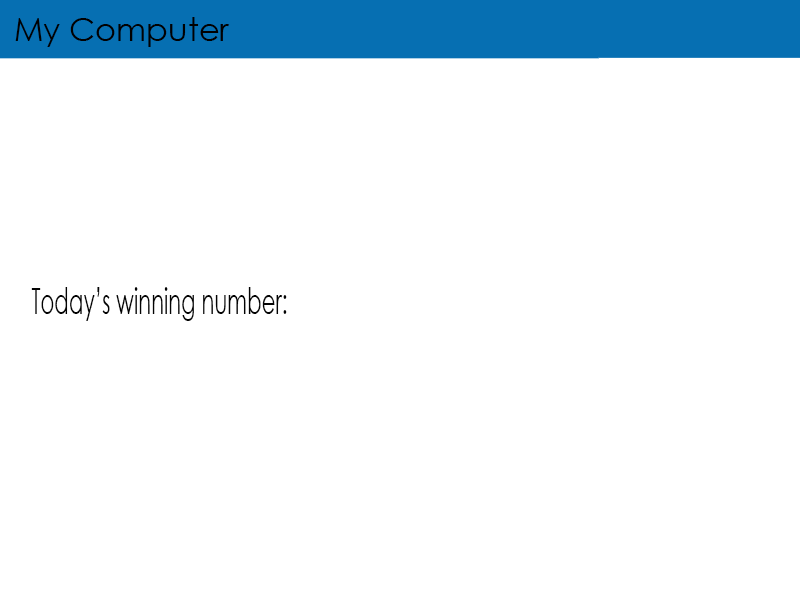
<style>
.page{position:relative;width:800px;height:600px;background:#ffffff}
.page>*{position:absolute;margin:0}
.t1{font:32px "CenturyGothic";color:#010101}
.t2{font:36px "CenturyGothic";color:#030303;scale:0.59 1}
</style>
<div class="page">
<p class="t1" style="left:15px;top:17px;width:215px;height:30px">My Computer</p>
<p class="t2" style="left:31px;top:287px;width:256px;height:34px">Today’s winning number:</p>
</div>
